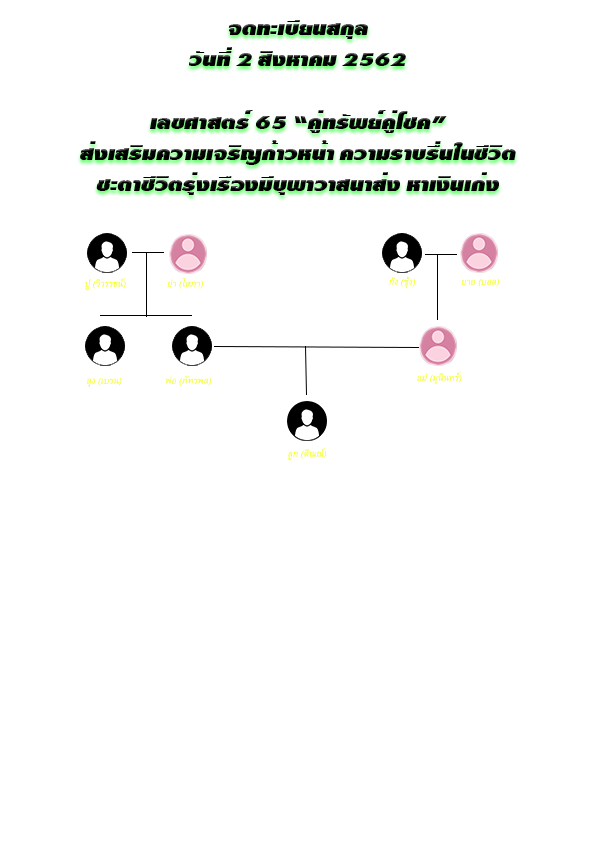
<style>
.page{position:relative;width:595px;height:842px;background:#ffffff}
.page>*{position:absolute;margin:0}
.t1{font:26px "DSNErawan";color:#000000;text-transform:uppercase;font-style:italic}
.t2{font:12.4px "BrowalliaNew";text-transform:uppercase;font-style:italic}
.t3{font:12.4px "BrowalliaNew";color:#f0ff00;text-transform:uppercase;font-style:italic}
</style>
<div class="page">
<p class="t1" style="left:80px;top:20px;width:436px;height:175px;text-align:center">จดทะเบียนสกุล<br>วันที่ 2 สิงหาคม 2562<br><br>เลขศาสตร์ 65 “คู่ทรัพย์คู่โชค”<br>ส่งเสริมความเจริญก้าวหน้า ความราบรื่นในชีวิต<br>ชะตาชีวิตรุ่งเรืองมีบุพาวาสนาส่ง หาเงินเก่ง</p>
<p class="t2" style="left:85px;top:278px;width:41px;height:13px">ปู่ (วิวรรธน์)</p>
<p class="t2" style="left:167px;top:278px;width:36px;height:11px">ย่า (โสภา)</p>
<p class="t2" style="left:389px;top:276px;width:27px;height:13px">ก๊ง (ชุ้ง)</p>
<p class="t2" style="left:461px;top:278px;width:38px;height:9px">ยาย (บอล)</p>
<p class="t2" style="left:87px;top:377px;width:35px;height:11px">ลุง (เบรน)</p>
<p class="t3" style="left:165px;top:375px;width:46px;height:11px">พ่อ (ภัทรพล)</p>
<p class="t2" style="left:417px;top:372px;width:45px;height:13px">แม่ (มุนินทร์)</p>
<p class="t2" style="left:288px;top:448px;width:39px;height:13px">ลูก (ติณณ์)</p>
</div>
